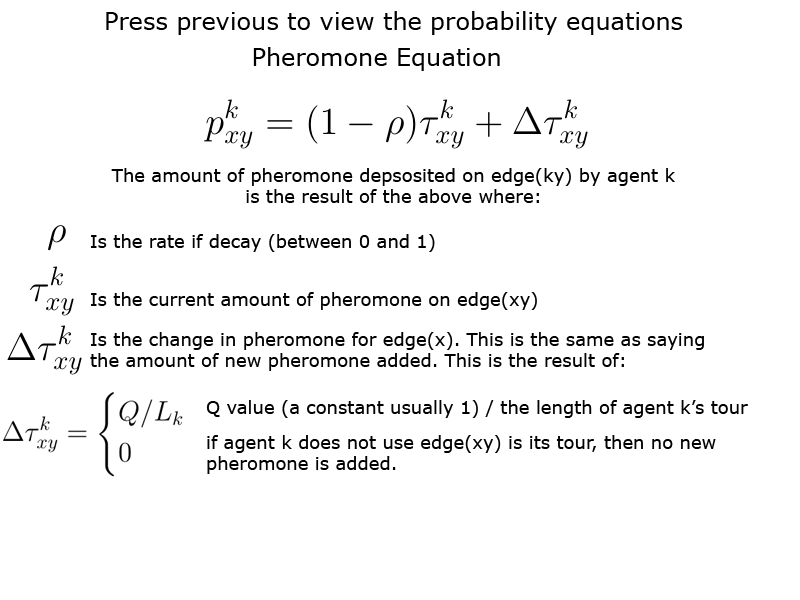
<style>
.page{position:relative;width:800px;height:600px;background:#ffffff}
.page>*{position:absolute;margin:0}
.t1{font:24px "Verdana";color:#000000}
.t2{font:18px "Verdana";color:#000000}
</style>
<div class="page">
<p class="t1" style="left:106px;top:11px;width:576px;height:24px">Press previous to view the probability equations</p>
<p class="t1" style="left:253px;top:47px;width:247px;height:24px">Pheromone Equation</p>
<p class="t2" style="left:111px;top:168px;width:564px;height:35px;text-align:center">The amount of pheromone depsosited on edge(ky) by agent k<br>is the result of the above where:</p>
<p class="t2" style="left:91px;top:234px;width:344px;height:18px">Is the rate if decay (between 0 and 1)</p>
<p class="t2" style="left:91px;top:292px;width:446px;height:18px">Is the current amount of pheromone on edge(xy)</p>
<p class="t2" style="left:90px;top:332px;width:614px;height:39px">Is the change in pheromone for edge(x). This is the same as saying the amount of new pheromone added. This is the result of:</p>
<p class="t2" style="left:206px;top:400px;width:542px;height:18px">Q value (a constant usually 1) / the length of agent k’s tour</p>
<p class="t2" style="left:207px;top:435px;width:509px;height:39px">if agent k does not use edge(xy) is its tour, then no new <br>pheromone is added.</p>
</div>
